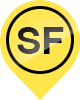
<style>
.page{position:relative;width:80px;height:100px;background:#ffffff}
.page>*{position:absolute;margin:0}
.t1{font:38px "Helvetica-Bold"}
</style>
<div class="page">
<p class="t1" style="left:17px;top:27px;width:47px;height:27px">SF</p>
</div>
